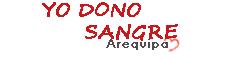
<style>
.page{position:relative;width:225px;height:58px;background:#ffffff}
.page>*{position:absolute;margin:0}
.t1{font:18px "SegoeScript";color:#cb171b;font-weight:bold}
</style>
<div class="page">
<p class="t1" style="left:42px;top:2px;width:136px;height:39px;text-align:center">YO DONO <br>  SANGRE</p>
</div>
